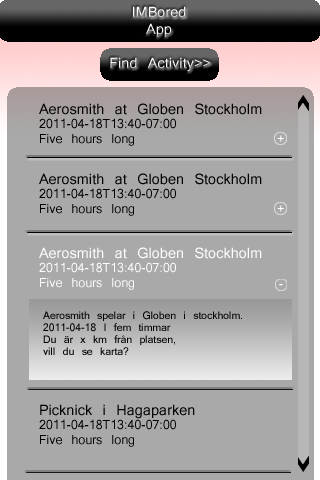
<style>
.page{position:relative;width:320px;height:480px;background:#a9a9a9}
.page>*{position:absolute;margin:0}
.t1{font:14px "Kartika";color:#ffffff}
.t2{font:12px "Kartika";color:#000000}
.t3{font:14px "Kartika";color:#000000}
.t4{font:12px "Kartika";color:#ffffff}
.t5{font:10px "Kartika";color:#000000}
</style>
<div class="page">
<p class="t1" style="left:133px;top:6px;width:53px;height:31px;text-align:center">IMBored<br>App</p>
<p class="t1" style="left:110px;top:57px;width:101px;height:15px">Find Activity&gt;&gt;</p>
<p class="t2" style="left:39px;top:103px;width:223px;height:43px"><span class="t3">Aerosmith at Globen Stockholm<br></span>2011-04-18T13:40-07:00<br>Five hours long</p>
<p class="t2" style="left:39px;top:173px;width:223px;height:43px"><span class="t3">Aerosmith at Globen Stockholm<br></span>2011-04-18T13:40-07:00<br>Five hours long</p>
<p class="t4" style="left:39px;top:247px;width:223px;height:43px"><span class="t1">Aerosmith at Globen Stockholm<br></span>2011-04-18T13:40-07:00<br>Five hours long</p>
<p class="t5" style="left:43px;top:311px;width:199px;height:44px">Aerosmith spelar i Globen i stockholm.<br>2011-04-18 I fem timmar<br>Du är x km från platsen, <br>vill du se karta?</p>
<p class="t2" style="left:39px;top:404px;width:156px;height:43px"><span class="t3">Picknick i Hagaparken<br></span>2011-04-18T13:40-07:00<br>Five hours long</p>
</div>
